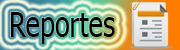
<style>
.page{position:relative;width:180px;height:50px}
.page>*{position:absolute;margin:0}
.t1{font:34.2px "Tahoma";color:#000000;scale:0.8 1}
</style>
<div class="page">
<p class="t1" style="left:11px;top:12px;width:104px;height:32px">Reportes</p>
</div>
